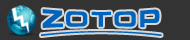
<style>
.page{position:relative;width:190px;height:40px;background:#333333}
.page>*{position:absolute;margin:0}
.t1{font:30px "ç»å¸ç»¼èºä½ç®-regular";letter-spacing:-0.02em;color:#0063be;text-decoration:underline}
</style>
<div class="page">
<p class="t1" style="left:41px;top:9px;width:121px;height:27px">ZOTOP</p>
</div>
